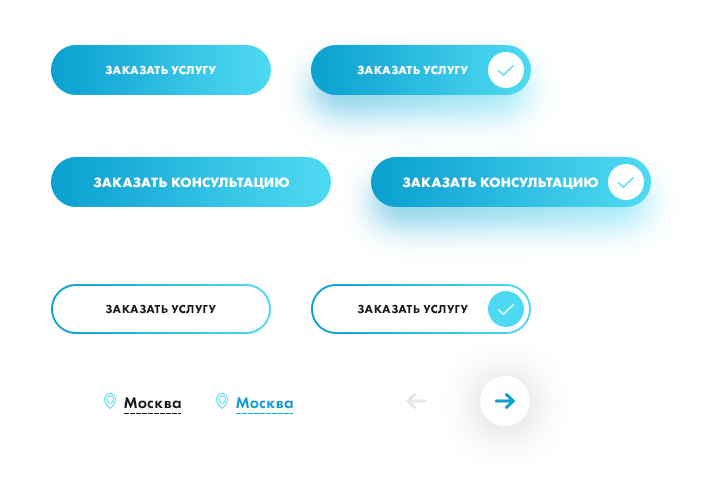
<style>
.page{position:relative;width:720px;height:480px;background:#ffffff}
.page>*{position:absolute;margin:0}
.t1{font:12px "FuturaPTBold";letter-spacing:0.02em;color:#fbfbfb}
.t2{font:14px "FuturaPTBold";letter-spacing:0.02em;color:#fefefe}
.t3{font:12px "FuturaPTBold";letter-spacing:0.02em;color:#1a1a1a}
.t4{font:16px "FuturaPTHeavy";letter-spacing:0.02em;color:#1a1a1a}
.t5{font:16px "FuturaPTHeavy";letter-spacing:0.02em;color:#0ba0d0}
</style>
<div class="page">
<p class="t1" style="left:105px;top:65px;width:111px;height:10px">ЗАКАЗАТЬ УСЛУГУ</p>
<p class="t1" style="left:357px;top:65px;width:111px;height:10px">ЗАКАЗАТЬ УСЛУГУ</p>
<p class="t2" style="left:93px;top:177px;width:196px;height:12px">ЗАКАЗАТЬ КОНСУЛЬТАЦИЮ</p>
<p class="t2" style="left:402px;top:177px;width:196px;height:12px">ЗАКАЗАТЬ КОНСУЛЬТАЦИЮ</p>
<p class="t3" style="left:105px;top:304px;width:111px;height:10px">ЗАКАЗАТЬ УСЛУГУ</p>
<p class="t3" style="left:357px;top:304px;width:111px;height:10px">ЗАКАЗАТЬ УСЛУГУ</p>
<p class="t4" style="left:124px;top:397px;width:57px;height:12px">Москва</p>
<p class="t5" style="left:236px;top:397px;width:57px;height:12px">Москва</p>
</div>
